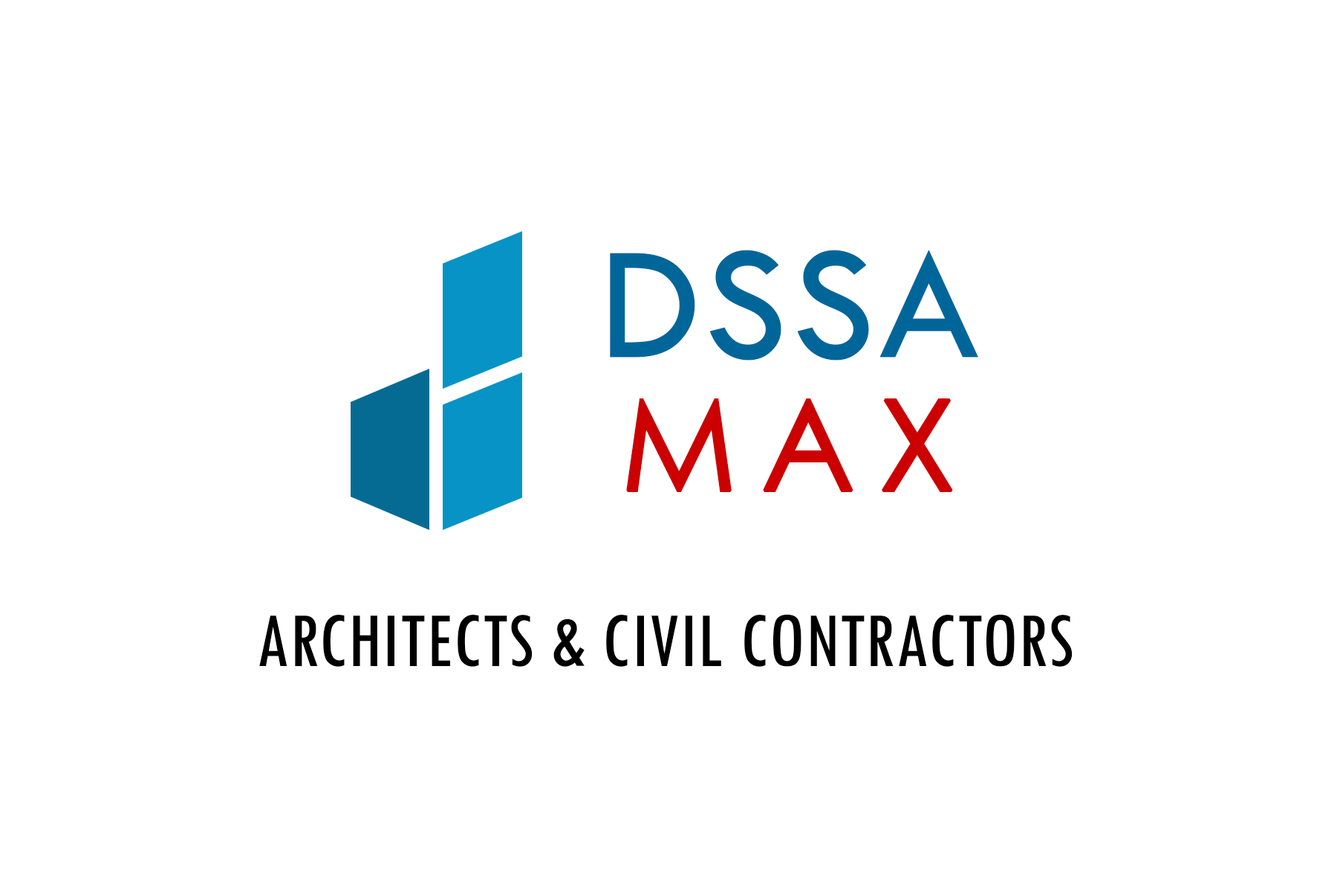
<style>
.page{position:relative;width:1337px;height:892px;background:#ffffff}
.page>*{position:absolute;margin:0}
.t1{font:166px "TwCenMT-Regular";color:#006699;font-weight:bold}
.t2{font:126.5px "CenturyGothic";letter-spacing:0.16em;color:#cc0000;text-transform:uppercase;font-weight:bold}
.t3{font:81.2px "TwCenMT-Condensed";color:#000000;text-transform:uppercase}
</style>
<div class="page">
<p class="t1" style="left:610px;top:250px;width:369px;height:110px">DSSA</p>
<p class="t2" style="left:626px;top:398px;width:327px;height:94px">max</p>
<p class="t3" style="left:259px;top:614px;width:814px;height:52px">ArchitecTS &amp; Civil Contractors</p>
</div>
